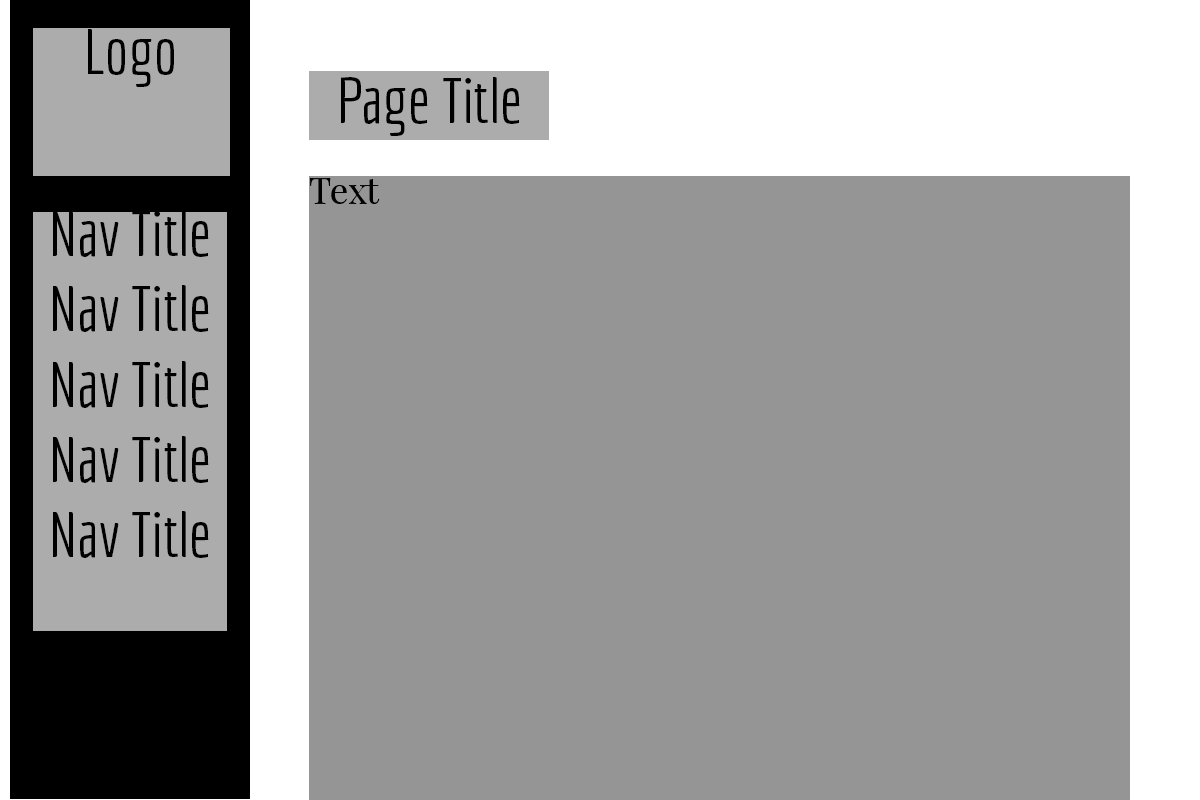
<style>
.page{position:relative;width:1200px;height:800px;background:#959595}
.page>*{position:absolute;margin:0}
.t1{font:62.8px "Economica-Regular";color:#000000}
.t2{font:36px "PlayfairDisplay-Regular";color:#000000}
</style>
<div class="page">
<p class="t1" style="left:88px;top:29px;width:86px;height:58px">Logo</p>
<p class="t1" style="left:341px;top:77px;width:179px;height:59px">Page Title</p>
<p class="t2" style="left:309px;top:178px;width:71px;height:26px">Text</p>
<p class="t1" style="left:53px;top:210px;width:156px;height:348px;text-align:center">Nav Title<br>Nav Title<br>Nav Title<br>Nav Title<br>Nav Title</p>
</div>
